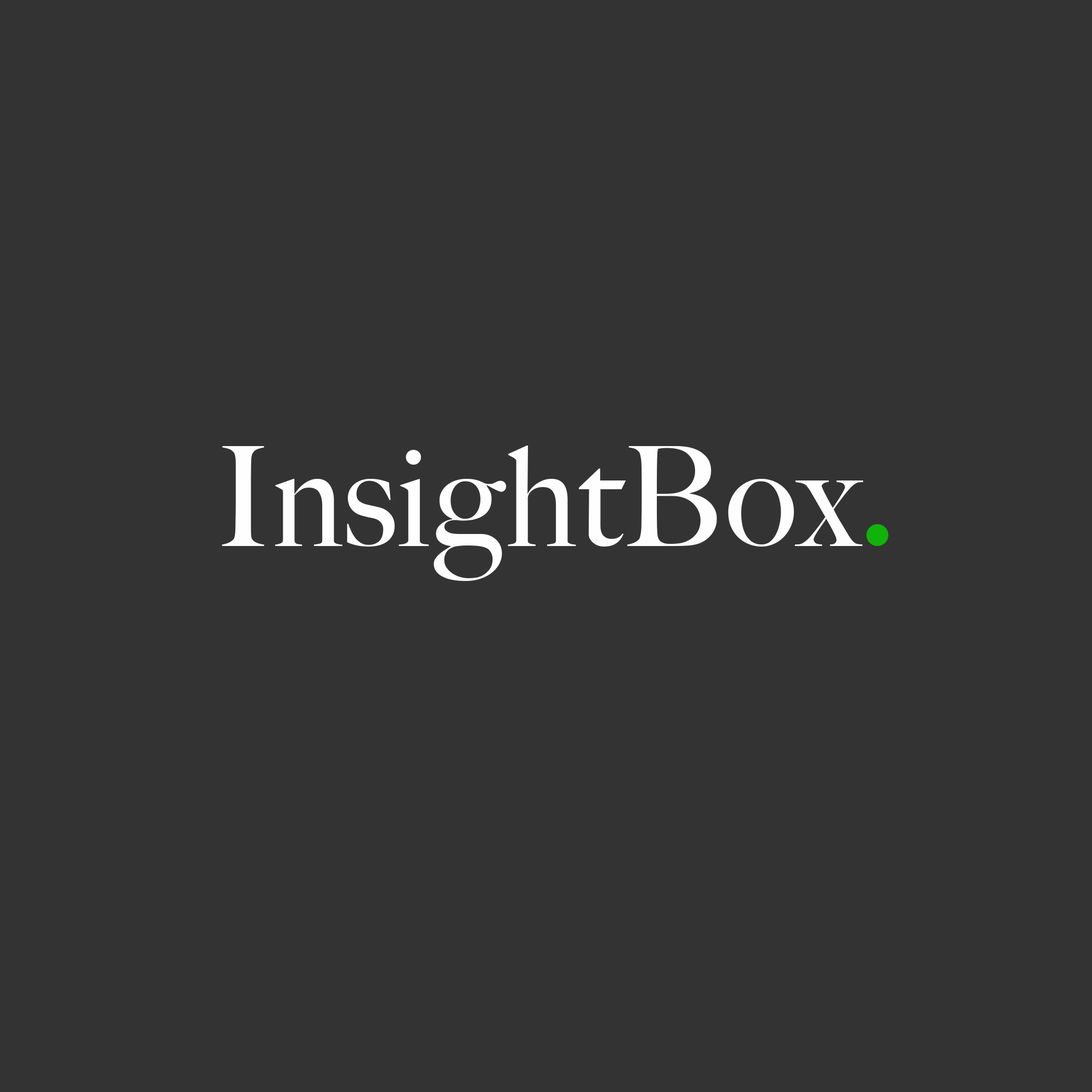
<style>
.page{position:relative;width:1092px;height:1092px;background:#333333}
.page>*{position:absolute;margin:0}
.t1{font:138.7px "BigCaslon-Medium";color:#fffefe}
</style>
<div class="page">
<p class="t1" style="left:222px;top:446px;width:641px;height:135px">InsightBox</p>
</div>
